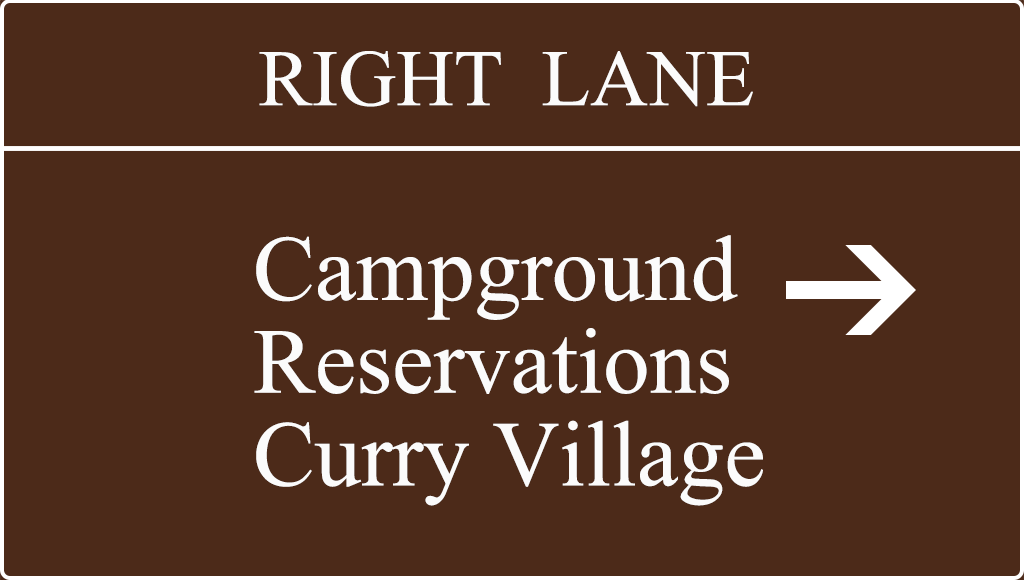
<style>
.page{position:relative;width:1024px;height:580px;background:#4c2a19}
.page>*{position:absolute;margin:0}
.t1{font:80px "IskoolaPota";color:#fbfbfb}
.t2{font:92.7px/92.7px "IskoolaPota";color:#fbfbfb}
</style>
<div class="page">
<p class="t1" style="left:259px;top:51px;width:494px;height:56px">RIGHT  LANE</p>
<p class="t2" style="left:254px;top:235px;width:509px;height:271px">Campground<br>Reservations<br>Curry Village</p>
</div>
